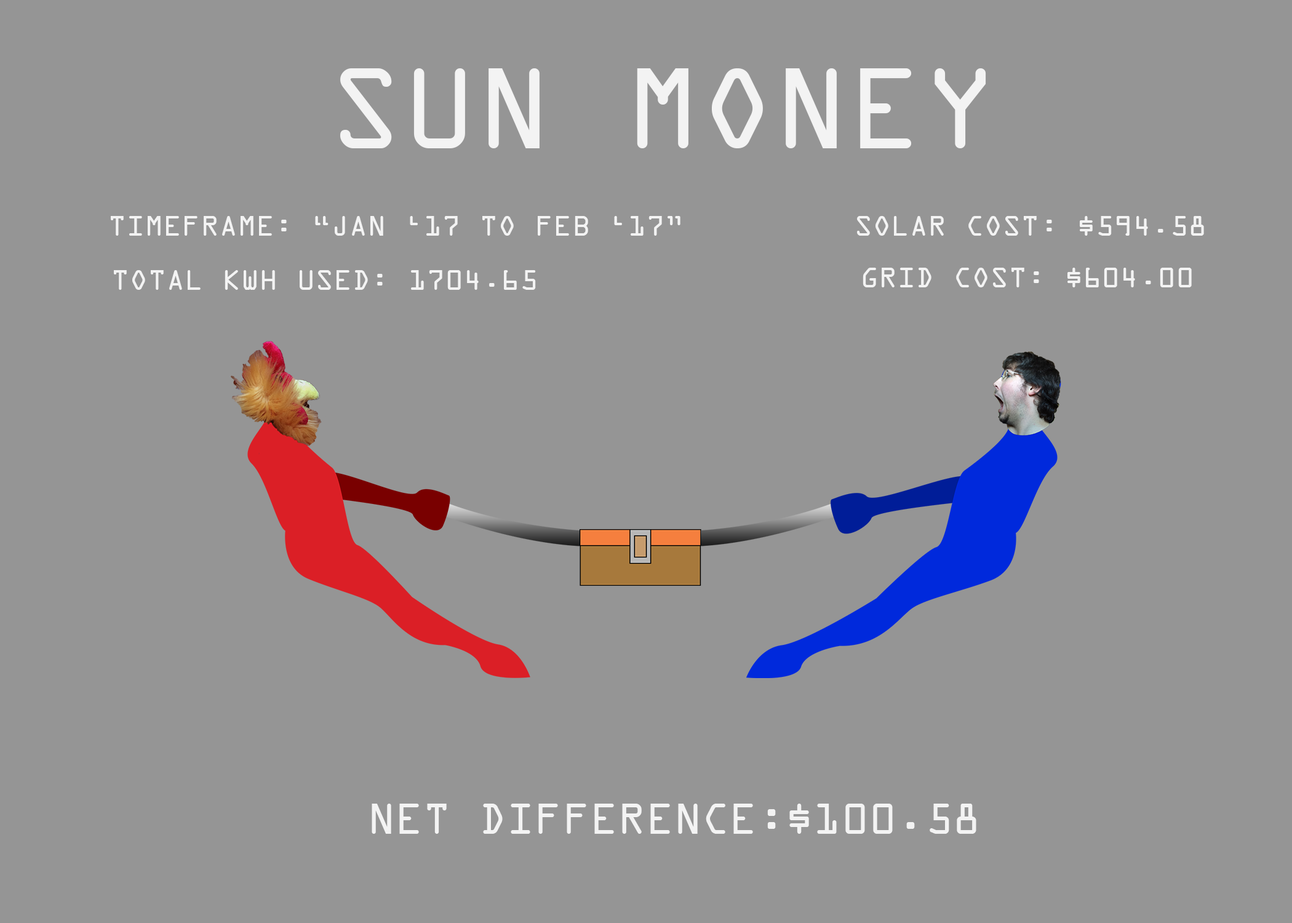
<style>
.page{position:relative;width:1292px;height:923px;background:#959595}
.page>*{position:absolute;margin:0}
.t1{font:123.1px "OCRAExtended";color:#f3f3f3}
.t2{font:30.8px "OCRAExtended";color:#f3f3f3}
.t3{font:46.1px "OCRAExtended";color:#f3f3f3}
</style>
<div class="page">
<p class="t1" style="left:340px;top:68px;width:646px;height:80px">SUN MONEY</p>
<p class="t2" style="left:111px;top:216px;width:569px;height:20px">TIMEFRAME: “JAN ‘17 TO FEB ‘17”</p>
<p class="t2" style="left:857px;top:216px;width:347px;height:20px">SOLAR COST: $594.58</p>
<p class="t2" style="left:863px;top:268px;width:329px;height:19px">GRID COST: $604.00</p>
<p class="t2" style="left:114px;top:270px;width:422px;height:20px">TOTAL KWH USED: 1704.65</p>
<p class="t3" style="left:372px;top:804px;width:604px;height:30px">NET DIFFERENCE:$100.58</p>
</div>
